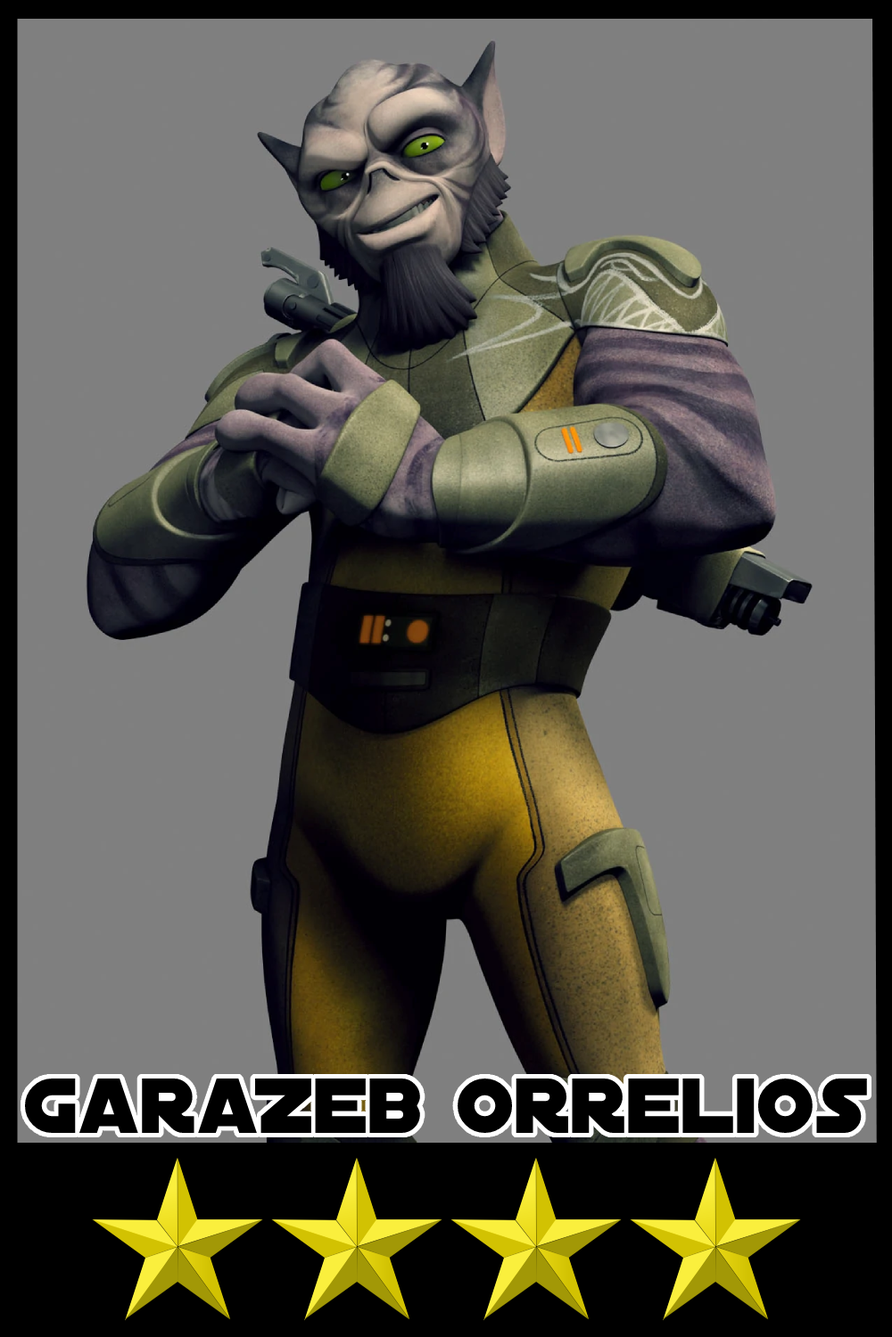
<style>
.page{position:relative;width:892px;height:1337px;background:#7f7f7f}
.page>*{position:absolute;margin:0}
.t1{font:83.7px "DistantGalaxy";color:#000000}
</style>
<div class="page">
<p class="t1" style="left:25px;top:1079px;width:842px;height:54px">GaraZeb Orrelios</p>
</div>
